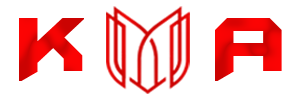
<style>
.page{position:relative;width:300px;height:100px;background:#ffffff}
.page>*{position:absolute;margin:0}
.t1{font:89.5px "BatmanForeverAlternate";font-weight:bold}
.t2{font:89.5px "BatmanForeverAlternate";color:#ed0403;font-weight:bold}
</style>
<div class="page">
<p class="t1" style="left:19px;top:18px;width:65px;height:63px">K</p>
<p class="t2" style="left:215px;top:18px;width:67px;height:63px">A</p>
</div>
